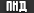
<style>
.page{position:relative;width:34px;height:13px}
.page>*{position:absolute;margin:0}
.t1{font:13.9px "NK_04";color:#ffffff}
</style>
<div class="page">
<p class="t1" style="left:6px;top:1px;width:21px;height:11px">ПНД</p>
</div>
